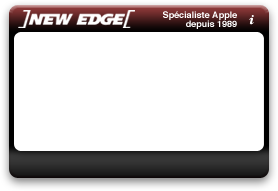
<style>
.page{position:relative;width:278px;height:191px;background:#ffffff}
.page>*{position:absolute;margin:0}
.t1{font:9px/9px "Helvetica-Bold";color:#ffffff}
</style>
<div class="page">
<p class="t1" style="left:163px;top:11px;width:74px;height:18px;text-align:right">Spécialiste Apple<br>depuis 1989</p>
</div>
